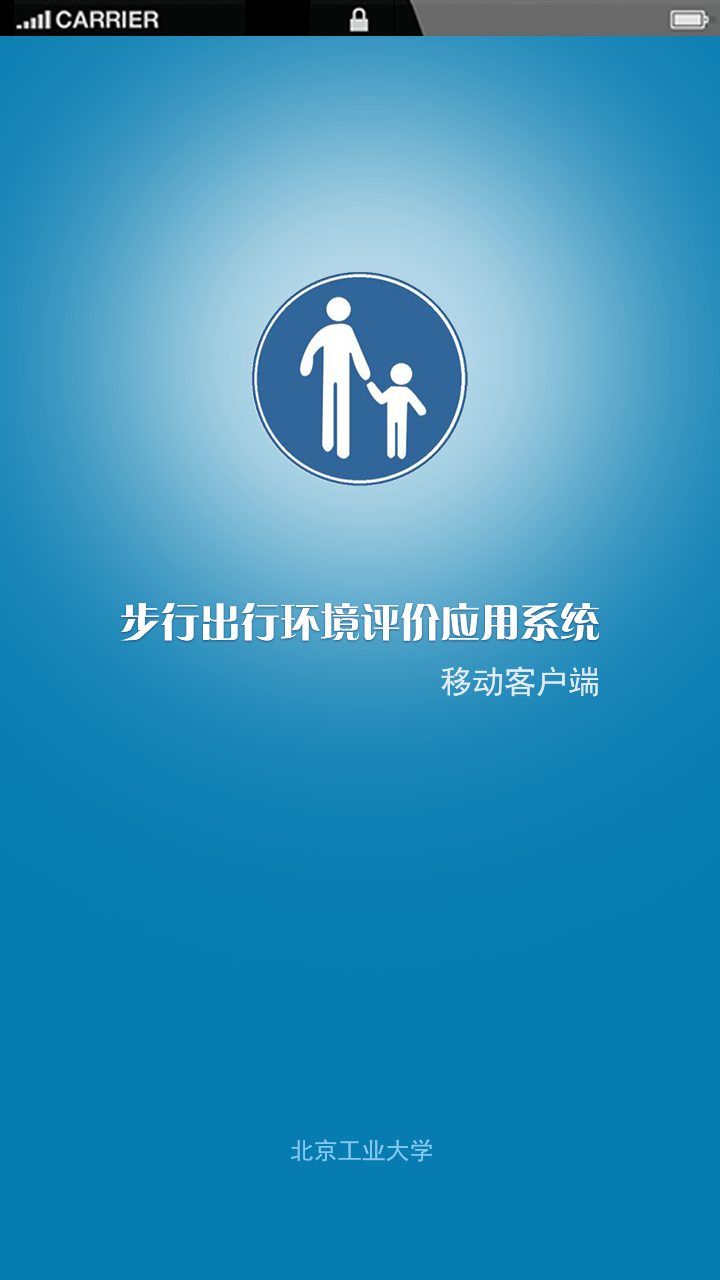
<style>
.page{position:relative;width:720px;height:1280px;background:#077cb1}
.page>*{position:absolute;margin:0}
.t1{font:40px "FZCQJW--GB1-0";color:#ffffff}
.t2{font:32px "SimHei";color:#e0ebf3}
.t3{font:24px "SimHei";color:#83c8f1}
</style>
<div class="page">
<p class="t1" style="left:121px;top:603px;width:478px;height:38px">步行出行环境评价应用系统</p>
<p class="t2" style="left:441px;top:666px;width:158px;height:31px">移动客户端</p>
<p class="t3" style="left:290px;top:1139px;width:142px;height:23px">北京工业大学</p>
</div>
